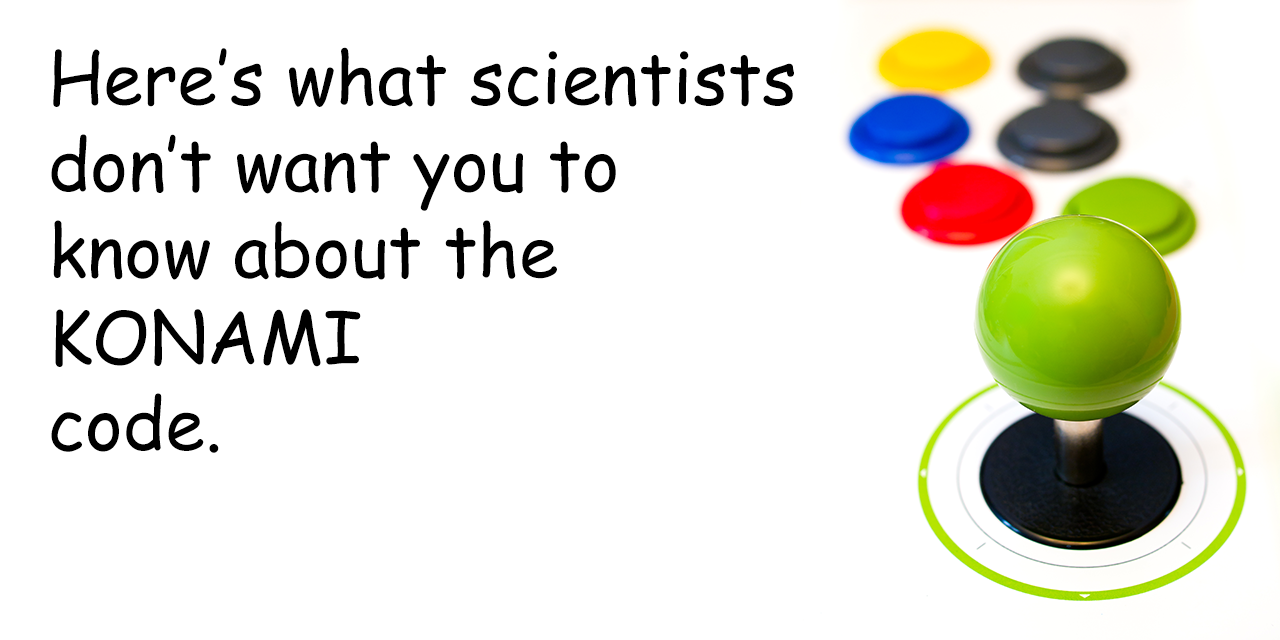
<style>
.page{position:relative;width:1280px;height:640px;background:#ffffff}
.page>*{position:absolute;margin:0}
.t1{font:72px "ComicSansMS";color:#000000}
</style>
<div class="page">
<p class="t1" style="left:51px;top:47px;width:743px;height:406px">Here’s what scientists<br>don’t want you to<br>know about the<br>KONAMI<br>code.</p>
</div>
